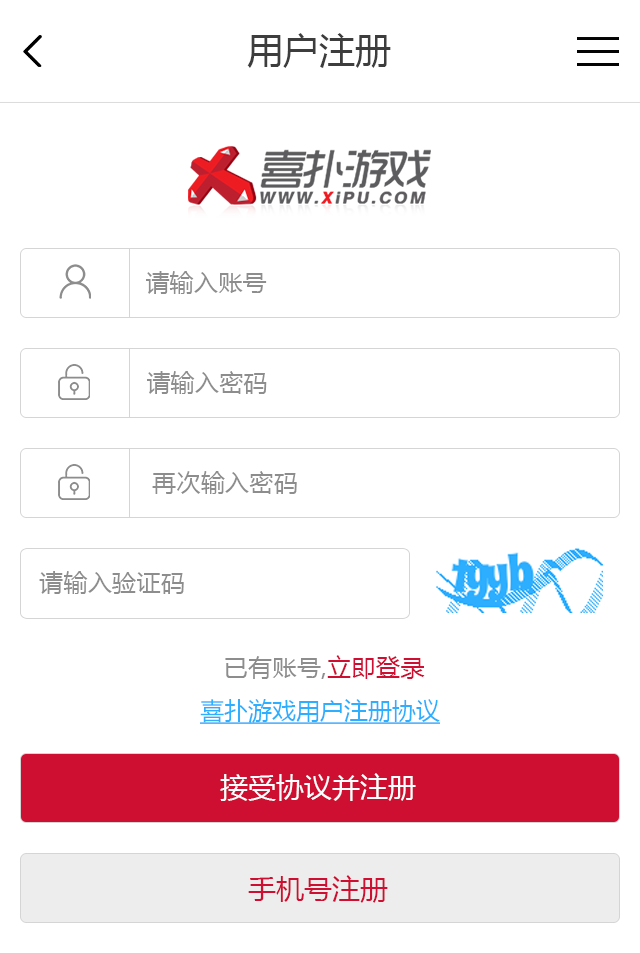
<style>
.page{position:relative;width:640px;height:953px;background:#ffffff}
.page>*{position:absolute;margin:0}
.t1{font:36px "MicrosoftYaHei";color:#3d3d3d}
.t2{font:24px "MicrosoftYaHei";letter-spacing:0.015em;color:#8d8d8d}
.t3{font:24px "MicrosoftYaHei";letter-spacing:0.015em;color:#cf0f32}
.t4{font:24px "MicrosoftYaHei";color:#2eaeff;text-decoration:underline}
.t5{font:28px "MicrosoftYaHei";color:#ffffff}
.t6{font:28px "MicrosoftYaHei";color:#cf0f32}
</style>
<div class="page">
<p class="t1" style="left:247px;top:33px;width:144px;height:35px">用户注册</p>
<p class="t2" style="left:146px;top:271px;width:121px;height:23px">请输入账号</p>
<p class="t2" style="left:147px;top:371px;width:120px;height:23px">请输入密码</p>
<p class="t2" style="left:152px;top:471px;width:145px;height:23px">再次输入密码</p>
<p class="t2" style="left:39px;top:571px;width:145px;height:23px">请输入验证码</p>
<p class="t2" style="left:225px;top:655px;width:200px;height:24px">已有账号,<span class="t3">立即登录</span></p>
<p class="t4" style="left:200px;top:699px;width:240px;height:25px">喜扑游戏用户注册协议</p>
<p class="t5" style="left:220px;top:773px;width:196px;height:28px">接受协议并注册</p>
<p class="t6" style="left:248px;top:875px;width:140px;height:28px">手机号注册</p>
</div>
